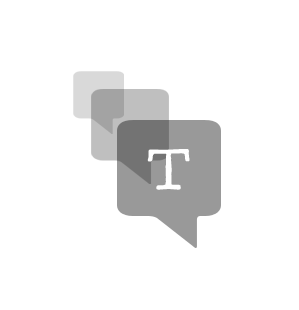
<style>
.page{position:relative;width:299px;height:310px;background:#ffffff}
.page>*{position:absolute;margin:0}
.t1{font:60px "F25Executive";color:#ffffff;scale:1.1 1}
</style>
<div class="page">
<p class="t1" style="left:147px;top:149px;width:43px;height:41px">T</p>
</div>
